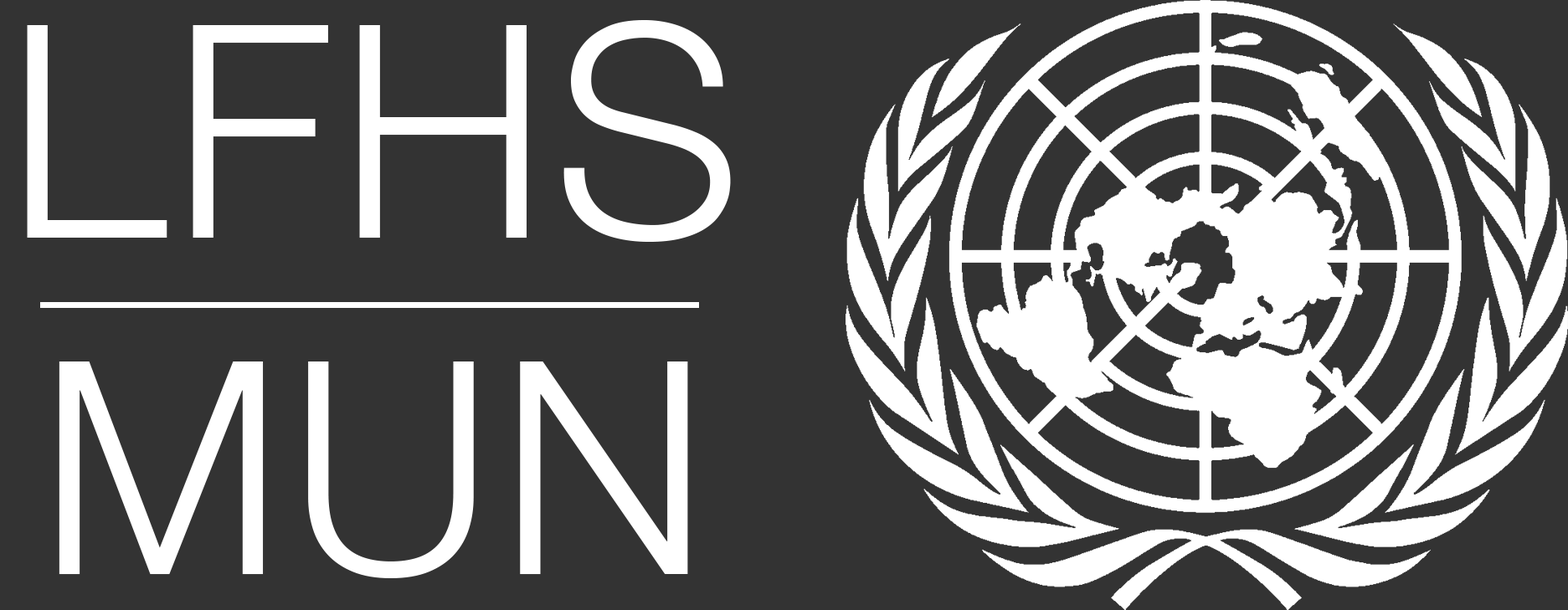
<style>
.page{position:relative;width:1568px;height:610px;background:#333333}
.page>*{position:absolute;margin:0}
.t1{font:298.2px/336.6px "HelveticaNeue-Light";letter-spacing:0.02em;color:#ffffff}
</style>
<div class="page">
<p class="t1" style="left:27px;top:20px;width:704px;height:558px;text-align:center">LFHS <br>MUN</p>
</div>
